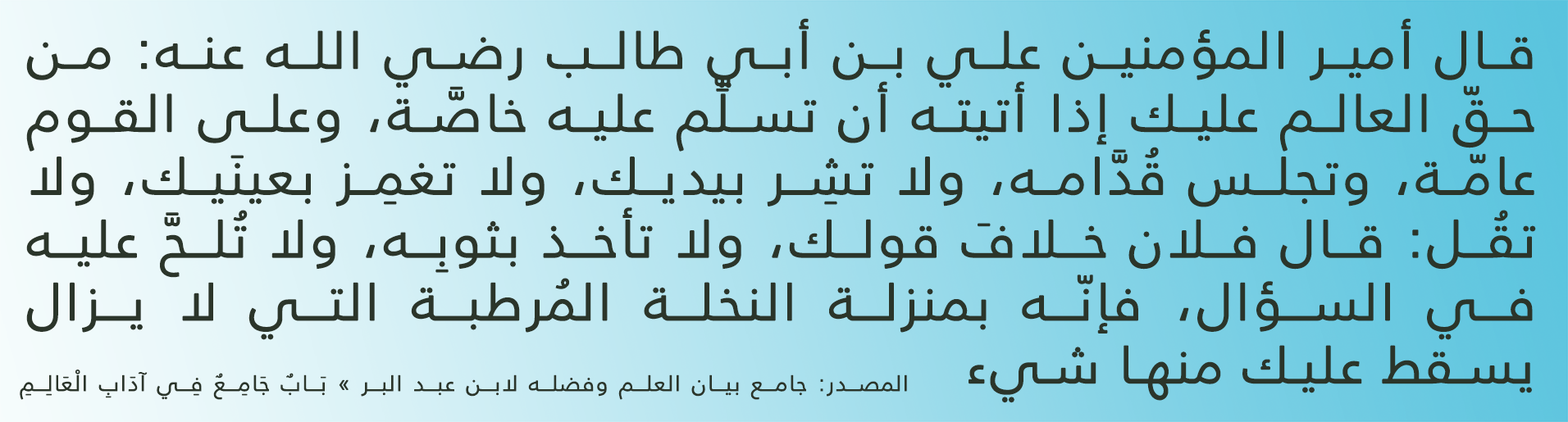
<style>
.page{position:relative;width:1568px;height:422px}
.page>*{position:absolute;margin:0}
.t1{font:52.5px "FrutigerLTArabic-45Light";letter-spacing:0.05em;color:#2b352a;font-weight:bold}
.t2{font:22.1px "FrutigerLTArabic-45Light";letter-spacing:0.05em;color:#2b352a;font-weight:bold}
</style>
<div class="page">
<p class="t1" style="left:26px;top:18px;width:1510px;height:385px;text-align:justify">قال أمير المؤمنين علي بن أبي طالب رضي الله عنه: من حقّ العالم عليك إذا أتيته أن تسلِّم عليه خاصَّة، وعلى القوم عامّة، وتجلس قُدَّامه، ولا تشِر بيديك، ولا تغمِز بعينَيك، ولا تقُل: قال فلان خلافَ قولك، ولا تأخذ بثوبِه، ولا تُلحَّ عليه في السؤال، فإنّه بمنزلة النخلة المُرطبة التي لا يزال يسقط عليك منها شيء</p>
<p class="t2" style="left:20px;top:370px;width:887px;height:30px">المصدر: جامع بيان العلم وفضله لابن عبد البر » بَابٌ جَامِعٌ فِي آدَابِ الْعَالِمِ وَالْمُتَعَلِّمِ</p>
</div>
